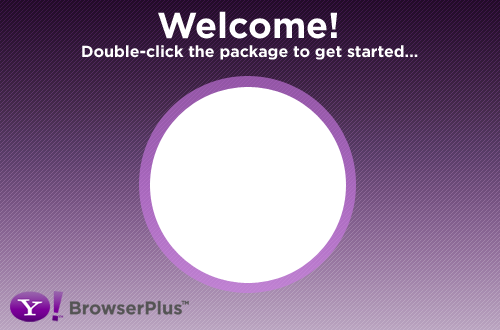
<style>
.page{position:relative;width:500px;height:330px}
.page>*{position:absolute;margin:0}
.t1{font:16px "Gotham-Bold";color:#ffffff}
.t2{font:36px "Gotham-Bold";color:#ffffff}
</style>
<div class="page">
<p class="t1" style="left:82px;top:11px;width:336px;height:49px;text-align:center"><span class="t2">Welcome!<br></span>Double-click the package to get started...</p>
</div>
